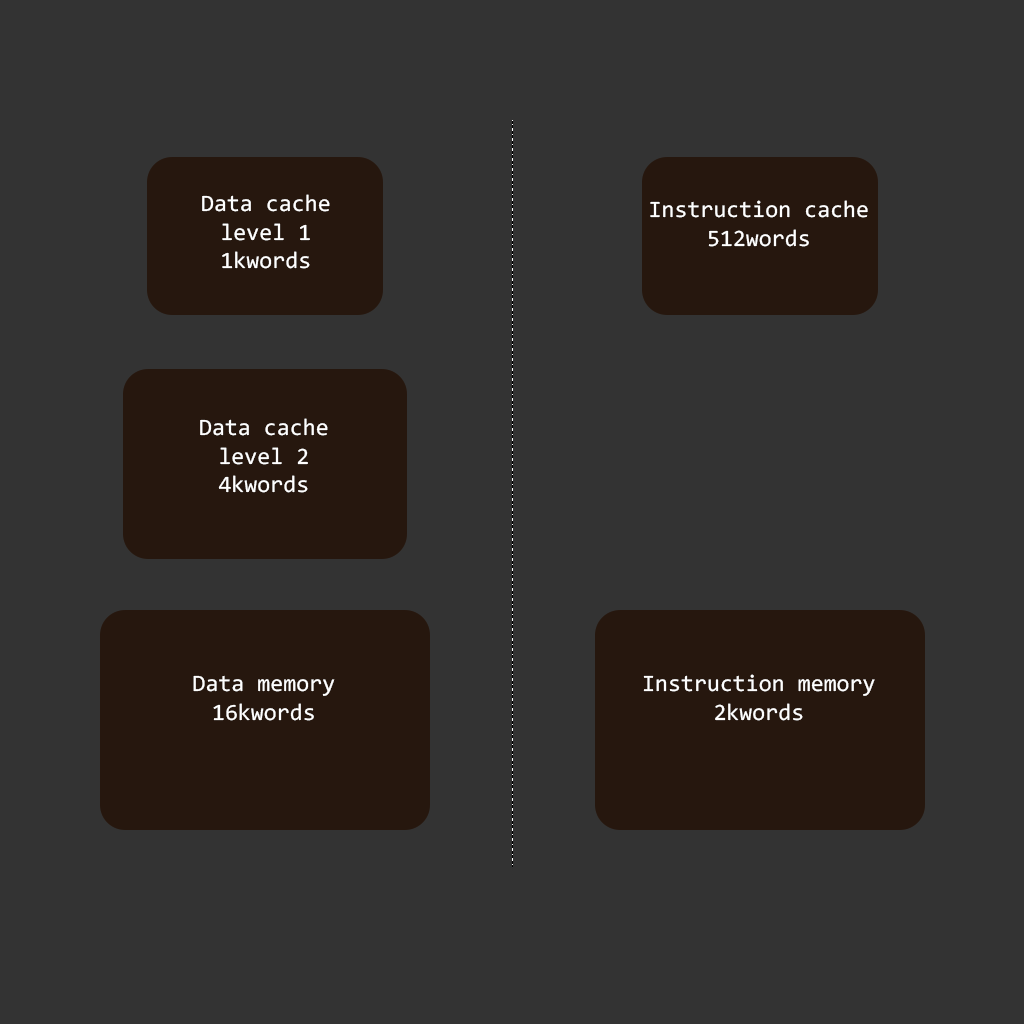
<style>
.page{position:relative;width:1024px;height:1024px;background:#333333}
.page>*{position:absolute;margin:0}
.t1{font:23.6px "Consolas";color:#ffffff}
.t2{font:23.6px "Consolas";color:#fefefe}
</style>
<div class="page">
<p class="t1" style="left:202px;top:194px;width:128px;height:75px;text-align:center">Data cache<br>level 1<br>1kwords</p>
<p class="t1" style="left:650px;top:200px;width:218px;height:47px;text-align:center">Instruction cache<br>512words</p>
<p class="t1" style="left:200px;top:418px;width:128px;height:75px;text-align:center">Data cache<br>level 2<br>4kwords</p>
<p class="t1" style="left:193px;top:675px;width:142px;height:46px;text-align:center">Data memory<br>16kwords</p>
<p class="t2" style="left:643px;top:674px;width:232px;height:47px;text-align:center">Instruction memory<br>2kwords</p>
</div>
